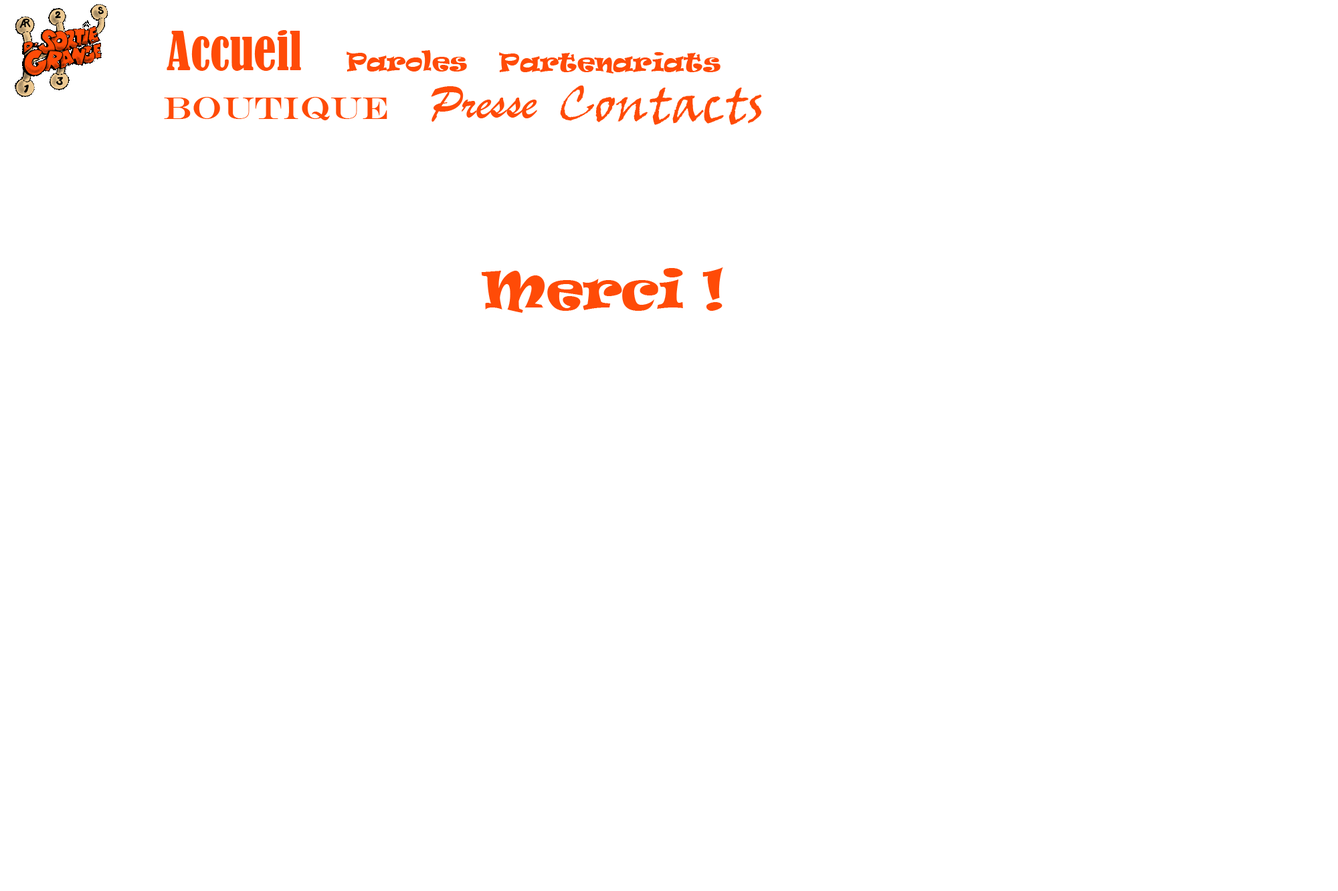
<style>
.page{position:relative;width:1338px;height:891px;background:#ffffff}
.page>*{position:absolute;margin:0}
.t1{font:50.2px "BernardMT-Condensed";color:#ff4b07}
.t2{font:24.1px "Ravie";color:#ff4b07}
.t3{font:50.2px "BrushScriptMT";color:#ff4b07}
.t4{font:50.2px "VinerHandITC";color:#ff4b07}
.t5{font:32.1px "EngraversMT";color:#ff4b07}
.t6{font:50.2px "Ravie";color:#ff4b07}
</style>
<div class="page">
<p class="t1" style="left:167px;top:30px;width:134px;height:41px">Accueil</p>
<p class="t2" style="left:346px;top:50px;width:121px;height:22px">Paroles</p>
<p class="t2" style="left:499px;top:52px;width:221px;height:22px">Partenariats</p>
<p class="t3" style="left:431px;top:86px;width:106px;height:36px">Presse</p>
<p class="t4" style="left:560px;top:85px;width:202px;height:40px">Contacts</p>
<p class="t5" style="left:164px;top:97px;width:223px;height:23px">Boutique</p>
<p class="t6" style="left:481px;top:268px;width:242px;height:45px">Merci !</p>
</div>
